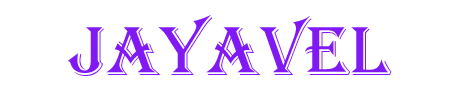
<style>
.page{position:relative;width:450px;height:100px;background:#ffffff}
.page>*{position:absolute;margin:0}
.t1{font:71.8px "Algerian";color:#8119f5}
</style>
<div class="page">
<p class="t1" style="left:67px;top:15px;width:325px;height:61px">JAYAVEL</p>
</div>
